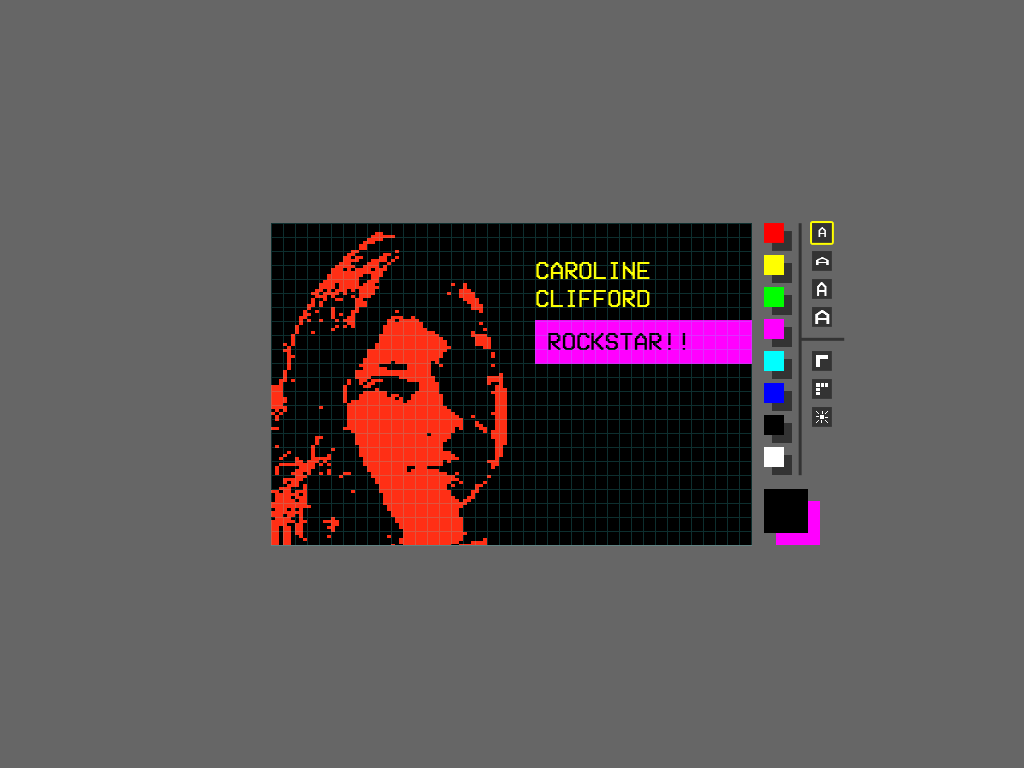
<style>
.page{position:relative;width:1024px;height:768px;background:#666666}
.page>*{position:absolute;margin:0}
.t1{font:14.3px "ModeSeven";color:#ffffff}
.t2{font:10.7px "ModeSeven";color:#ffffff;scale:2.38 1}
.t3{font:24px/28px "ModeSeven";color:#ffff00}
.t4{font:19.7px "ModeSeven";color:#ffffff;scale:0.94 1}
.t5{font:19.7px "ModeSeven";color:#ffffff;scale:1.42 1}
.t6{font:24px "ModeSeven";color:#000000}
</style>
<div class="page">
<p class="t1" style="left:818px;top:227px;width:8px;height:10px">A</p>
<p class="t2" style="left:816px;top:257px;width:13px;height:8px">A</p>
<p class="t3" style="left:536px;top:262px;width:114px;height:45px">CAROLINE <br>CLIFFORD</p>
<p class="t4" style="left:817px;top:282px;width:10px;height:14px">A</p>
<p class="t5" style="left:815px;top:310px;width:15px;height:14px">A</p>
<p class="t6" style="left:548px;top:333px;width:138px;height:17px">ROCKSTAR!!</p>
</div>
